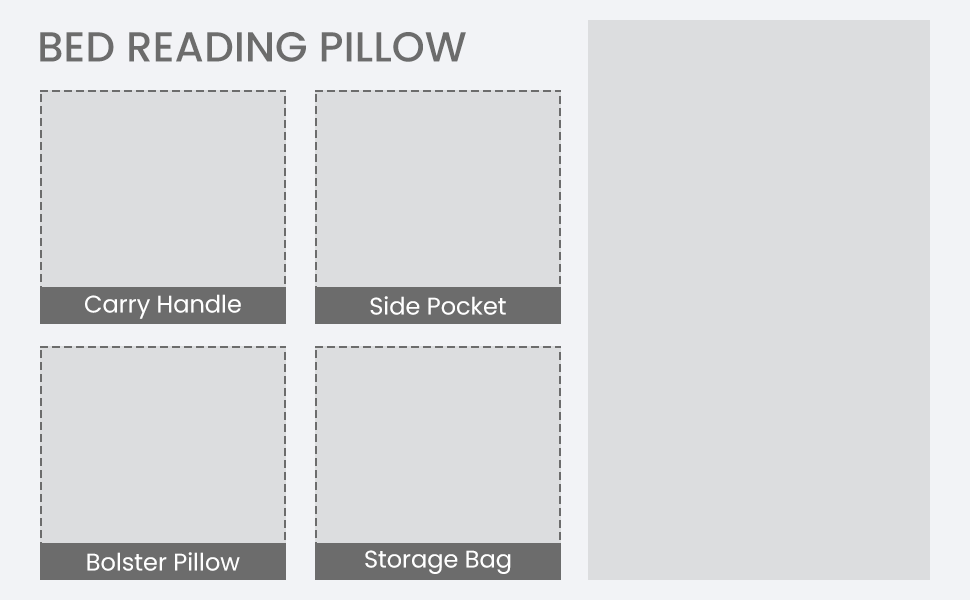
<style>
.page{position:relative;width:970px;height:600px;background:#dcdddf}
.page>*{position:absolute;margin:0}
.t1{font:42px "Poppins-Medium";color:#6c6c6c;text-transform:uppercase}
.t2{font:24px "Poppins-Regular";color:#ffffff}
</style>
<div class="page">
<p class="t1" style="left:40px;top:32px;width:426px;height:30px">Bed Reading Pillow</p>
<p class="t2" style="left:85px;top:294px;width:156px;height:25px">Carry Handle</p>
<p class="t2" style="left:370px;top:296px;width:136px;height:19px">Side Pocket</p>
<p class="t2" style="left:87px;top:552px;width:153px;height:19px">Bolster Pillow</p>
<p class="t2" style="left:365px;top:550px;width:146px;height:24px">Storage Bag</p>
</div>
